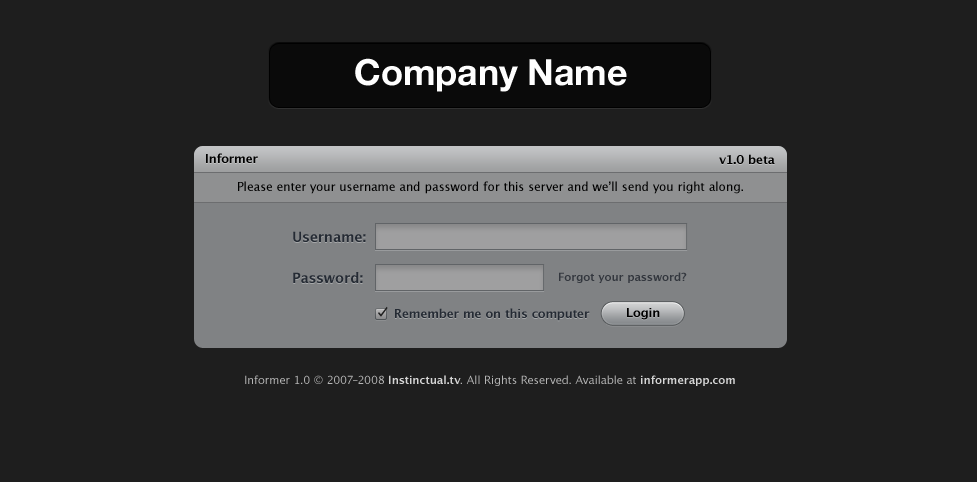
<style>
.page{position:relative;width:977px;height:482px;background:#1e1e1e}
.page>*{position:absolute;margin:0}
.t1{font:36px "HelveticaNeue-Bold";color:#fefefe}
.t2{font:12px "LucidaGrande-Bold";color:#000000}
.t3{font:12px "LucidaGrande";color:#000000}
.t4{font:14px "LucidaGrande-Bold";color:#252b34}
.t5{font:11px "LucidaGrande-Bold";color:#33373e}
.t6{font:12px "LucidaGrande-Bold";color:#252b34}
.t7{font:11px "LucidaGrande";color:#b5b5b5}
.t8{font:11px "LucidaGrande-Bold";color:#d5d5d5}
</style>
<div class="page">
<p class="t1" style="left:355px;top:58px;width:272px;height:34px">Company Name</p>
<p class="t2" style="left:206px;top:153px;width:52px;height:10px">Informer</p>
<p class="t2" style="left:719px;top:154px;width:56px;height:10px">v1.0 beta</p>
<p class="t3" style="left:238px;top:181px;width:505px;height:13px">Please enter your username and password for this server and we’ll send you right along.</p>
<p class="t4" style="left:293px;top:231px;width:73px;height:11px">Username:</p>
<p class="t4" style="left:293px;top:272px;width:70px;height:11px">Password:</p>
<p class="t5" style="left:559px;top:272px;width:128px;height:11px">Forgot your password?</p>
<p class="t6" style="left:395px;top:308px;width:195px;height:13px">Remember me on this computer</p>
<p class="t2" style="left:627px;top:308px;width:33px;height:12px">Login</p>
<p class="t7" style="left:245px;top:375px;width:490px;height:11px">Informer 1.0 © 2007–2008 <span class="t8">Instinctual.tv</span>. All Rights Reserved. Available at <span class="t8">informerapp.com</span></p>
</div>
